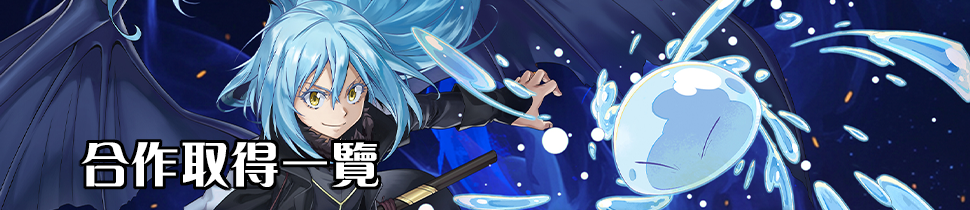
<style>
.page{position:relative;width:970px;height:210px}
.page>*{position:absolute;margin:0}
.t1{font:50px "MEllanHK-Xbold";color:#ffffff}
</style>
<div class="page">
<p class="t1" style="left:81px;top:142px;width:298px;height:46px">合作取得一覽</p>
</div>
